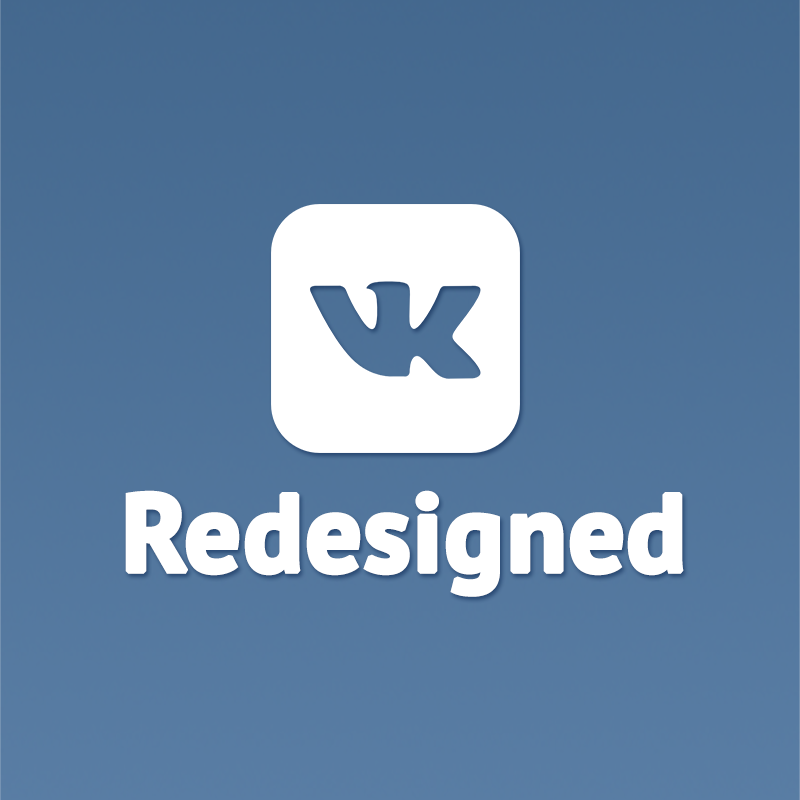
<style>
.page{position:relative;width:800px;height:800px}
.page>*{position:absolute;margin:0}
.t1{font:109.1px "PTSans-Bold";color:#ffffff;font-weight:bold}
</style>
<div class="page">
<p class="t1" style="left:125px;top:490px;width:559px;height:107px">Redesigned</p>
</div>
